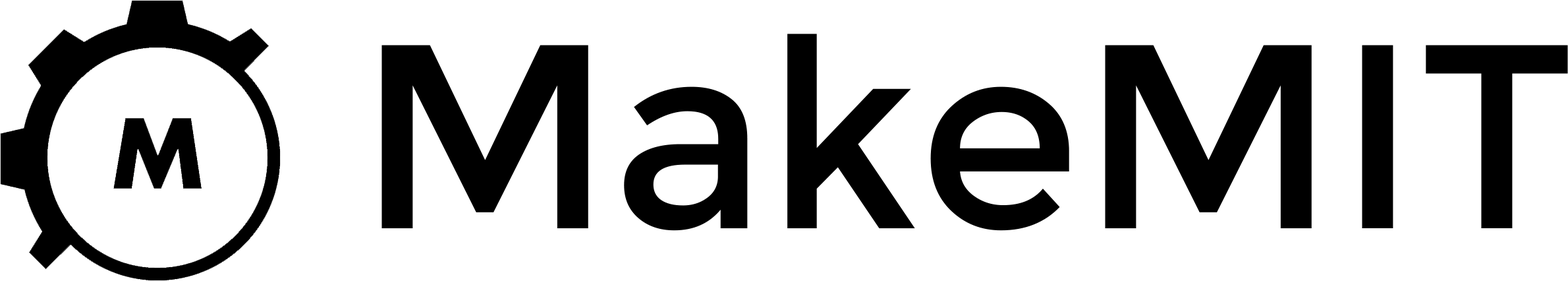
<style>
.page{position:relative;width:1568px;height:281px;background:#ffffff}
.page>*{position:absolute;margin:0}
.t1{font:261.3px "Montserrat-Regular";color:#000000}
</style>
<div class="page">
<p class="t1" style="left:381px;top:34px;width:1187px;height:197px">MakeMIT</p>
</div>
